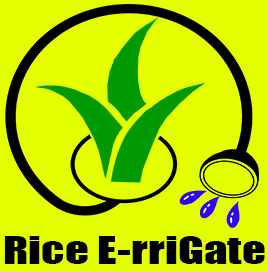
<style>
.page{position:relative;width:268px;height:272px;background:#e4ff00}
.page>*{position:absolute;margin:0}
.t1{font:35.9px "Impact";color:#000000;scale:1.32 1}
</style>
<div class="page">
<p class="t1" style="left:4px;top:236px;width:261px;height:28px">Rice E-rriGate</p>
</div>
